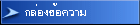
<style>
.page{position:relative;width:140px;height:25px}
.page>*{position:absolute;margin:0}
.t1{font:15.3px "EucrosiaDSE";color:#ffffff;scale:1.12 1}
</style>
<div class="page">
<p class="t1" style="left:25px;top:3px;width:61px;height:13px">¡ÅèÍ§¢éÍ¤ÇÒÁ</p>
</div>
